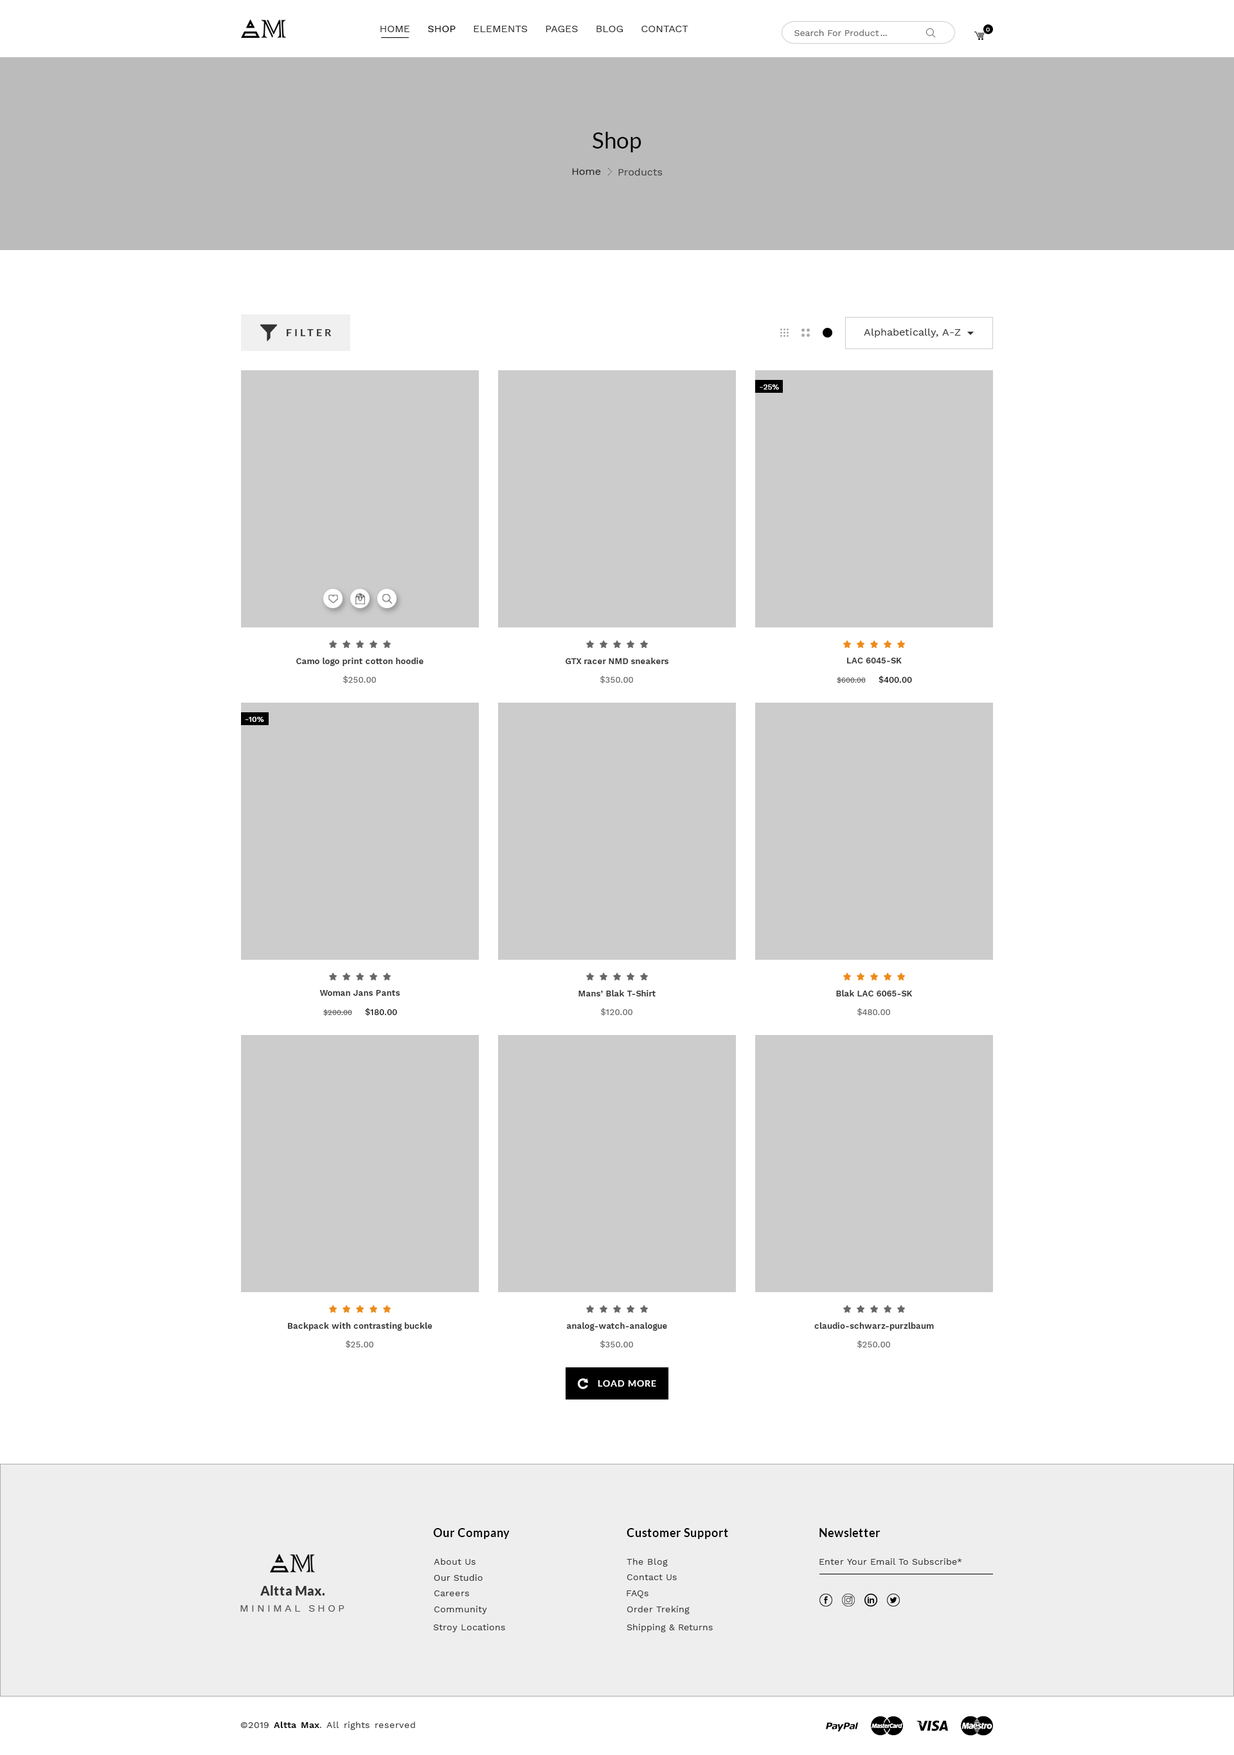
<style>
.page{position:relative;width:1234px;height:1755px;background:#ffffff}
.page>*{position:absolute;margin:0}
.t1{font:10.3px "WorkSans-Regular";color:#333333}
.t2{font:10.3px "WorkSans-Regular";color:#000000}
.t3{font:9px "WorkSans-Regular";color:#666666}
.t4{font:6.4px "WorkSans-Regular";color:#ffffff}
.t5{font:22.5px "Lato-Regular";color:#000000}
.t6{font:10.3px "WorkSans-Regular";color:#222222}
.t7{font:10.3px "WorkSans-Regular";color:#444444}
.t8{font:10.3px "Lato-Bold";letter-spacing:0.25em;color:#333333}
.t9{font:10.3px "WorkSans-Regular";letter-spacing:0.025em;color:#333333}
.t10{font:7.7px "WorkSans-Medium";letter-spacing:0.01em;color:#ffffff}
.t11{font:8.4px "WorkSans-SemiBold";letter-spacing:0.01em;color:#333333}
.t12{font:8.4px "WorkSans-Medium";letter-spacing:0.01em;color:#666666}
.t13{font:7.1px "WorkSans-Medium";letter-spacing:0.01em;color:#666666}
.t14{font:8.4px "WorkSans-Medium";letter-spacing:0.01em;color:#010101}
.t15{font:8.4px "WorkSans-Medium";letter-spacing:0.01em;color:#000000}
.t16{font:9px "Lato-Bold";letter-spacing:0.08em;color:#ffffff}
.t17{font:11.6px "Lato-Bold";letter-spacing:0.03em;color:#000000}
.t18{font:9px "WorkSans-Regular";letter-spacing:0.03em;color:#333333}
.t19{font:12.9px "Lato-Black";letter-spacing:0.03em;color:#333333}
.t20{font:10.3px "WorkSans-Regular";letter-spacing:0.25em;color:#555555}
.t21{font:9px "WorkSans-SemiBold";letter-spacing:0.03em;color:#000000}
</style>
<div class="page">
<p class="t1" style="left:381px;top:26px;width:307px;height:6px">HOME     <span class="t2">SHOP</span>     ELEMENTS     PAGES     BLOG     CONTACT</p>
<p class="t3" style="left:795px;top:30px;width:84px;height:6px">Search For Product</p>
<p class="t4" style="left:986px;top:28px;width:4px;height:4px">0</p>
<p class="t3" style="left:881px;top:35px;width:6px;height:1px">...</p>
<p class="t5" style="left:593px;top:132px;width:49px;height:20px">Shop</p>
<p class="t6" style="left:572px;top:168px;width:29px;height:7px">Home</p>
<p class="t7" style="left:618px;top:168px;width:45px;height:8px">Products</p>
<p class="t8" style="left:287px;top:329px;width:45px;height:7px">FILTER</p>
<p class="t9" style="left:864px;top:328px;width:97px;height:10px">Alphabetically, A-Z</p>
<p class="t10" style="left:760px;top:384px;width:19px;height:6px">-25%</p>
<p class="t11" style="left:296px;top:658px;width:128px;height:8px">Camo logo print cotton hoodie</p>
<p class="t11" style="left:566px;top:658px;width:103px;height:6px">GTX racer NMD sneakers</p>
<p class="t11" style="left:847px;top:658px;width:55px;height:5px">LAC 6045-SK</p>
<p class="t12" style="left:343px;top:676px;width:33px;height:7px">$250.00</p>
<p class="t12" style="left:600px;top:676px;width:33px;height:7px">$350.00</p>
<p class="t13" style="left:837px;top:676px;width:75px;height:7px">$600.00     <span class="t14">$400.00</span></p>
<p class="t10" style="left:245px;top:717px;width:19px;height:5px">-10%</p>
<p class="t11" style="left:320px;top:990px;width:80px;height:6px">Woman Jans Pants</p>
<p class="t11" style="left:579px;top:990px;width:77px;height:6px">Mans’ Blak T-Shirt</p>
<p class="t11" style="left:836px;top:990px;width:77px;height:6px">Blak LAC 6065-SK</p>
<p class="t13" style="left:323px;top:1008px;width:74px;height:8px">$200.00     <span class="t15">$180.00</span></p>
<p class="t12" style="left:601px;top:1008px;width:32px;height:8px">$120.00</p>
<p class="t12" style="left:858px;top:1008px;width:32px;height:8px">$480.00</p>
<p class="t11" style="left:288px;top:1322px;width:145px;height:9px">Backpack with contrasting buckle</p>
<p class="t11" style="left:567px;top:1322px;width:100px;height:9px">analog-watch-analogue</p>
<p class="t11" style="left:815px;top:1322px;width:119px;height:9px">claudio-schwarz-purzlbaum</p>
<p class="t12" style="left:346px;top:1340px;width:28px;height:8px">$25.00</p>
<p class="t12" style="left:600px;top:1340px;width:33px;height:8px">$350.00</p>
<p class="t12" style="left:858px;top:1340px;width:32px;height:8px">$250.00</p>
<p class="t16" style="left:598px;top:1380px;width:58px;height:7px">LOAD MORE</p>
<p class="t17" style="left:433px;top:1528px;width:77px;height:11px">Our Company</p>
<p class="t17" style="left:627px;top:1528px;width:101px;height:11px">Customer Support</p>
<p class="t17" style="left:820px;top:1528px;width:60px;height:9px">Newsletter</p>
<p class="t18" style="left:434px;top:1558px;width:42px;height:7px">About Us</p>
<p class="t18" style="left:627px;top:1558px;width:41px;height:9px">The Blog</p>
<p class="t18" style="left:820px;top:1558px;width:142px;height:7px">Enter Your Email To Subscribe*</p>
<p class="t18" style="left:434px;top:1574px;width:49px;height:7px">Our Studio</p>
<p class="t18" style="left:627px;top:1574px;width:50px;height:6px">Contact Us</p>
<p class="t19" style="left:260px;top:1585px;width:65px;height:11px">Altta Max.</p>
<p class="t18" style="left:434px;top:1590px;width:35px;height:6px">Careers</p>
<p class="t18" style="left:627px;top:1590px;width:22px;height:8px">FAQs</p>
<p class="t20" style="left:240px;top:1605px;width:105px;height:7px">MINIMAL SHOP</p>
<p class="t18" style="left:434px;top:1606px;width:53px;height:8px">Community</p>
<p class="t18" style="left:627px;top:1606px;width:63px;height:8px">Order Treking</p>
<p class="t18" style="left:433px;top:1624px;width:72px;height:8px">Stroy Locations</p>
<p class="t18" style="left:627px;top:1624px;width:86px;height:8px">Shipping &amp; Returns</p>
<p class="t18" style="left:240px;top:1722px;width:175px;height:8px">©2019 <span class="t21">Altta Max</span>. All rights reserved</p>
</div>
